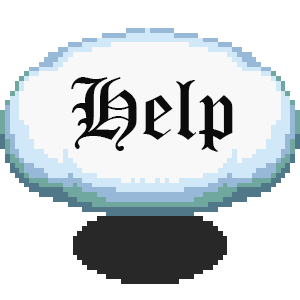
<style>
.page{position:relative;width:300px;height:300px;background:#ffffff}
.page>*{position:absolute;margin:0}
.t1{font:85px "OldEnglishTextMT";color:#0b0b0b}
</style>
<div class="page">
<p class="t1" style="left:71px;top:77px;width:162px;height:75px">Help</p>
</div>
